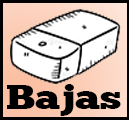
<style>
.page{position:relative;width:129px;height:120px;background:#ffffff}
.page>*{position:absolute;margin:0}
.t1{font:33.9px "ChunkFiveEx";color:#000000;scale:1.23 1}
</style>
<div class="page">
<p class="t1" style="left:7px;top:84px;width:114px;height:32px">Bajas</p>
</div>
